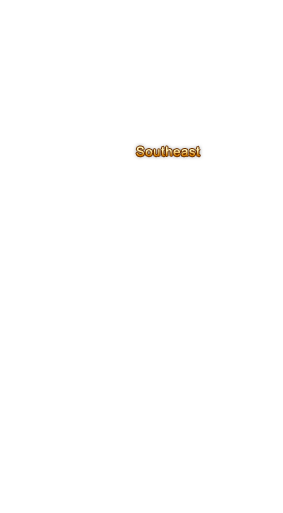
<style>
.page{position:relative;width:283px;height:513px;background:#ffffff}
.page>*{position:absolute;margin:0}
.t1{font:13px "ArialMT";letter-spacing:0.05em}
</style>
<div class="page">
<p class="t1" style="left:136px;top:146px;width:64px;height:11px">Southeast</p>
</div>
